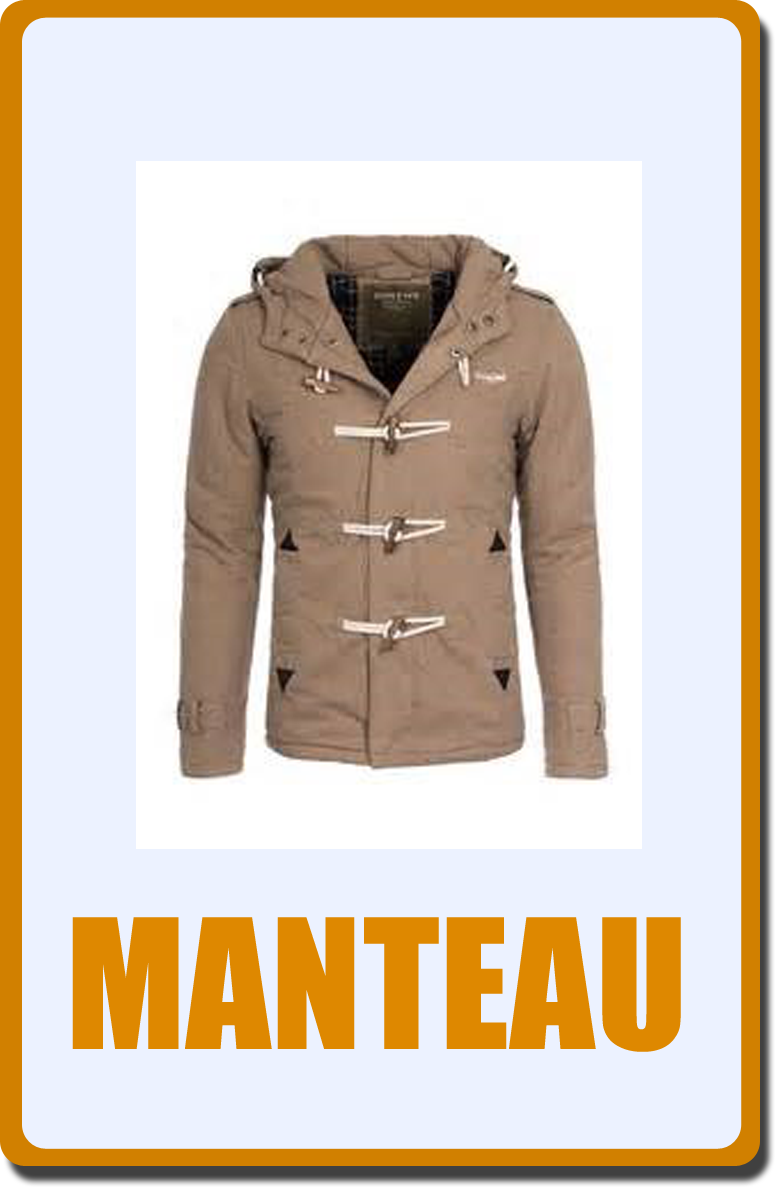
<style>
.page{position:relative;width:775px;height:1187px;background:#ecf2ff}
.page>*{position:absolute;margin:0}
.t1{font:166.7px "Impact";letter-spacing:0.005em;color:#de8800}
</style>
<div class="page">
<p class="t1" style="left:72px;top:917px;width:609px;height:135px">MANTEAU</p>
</div>
